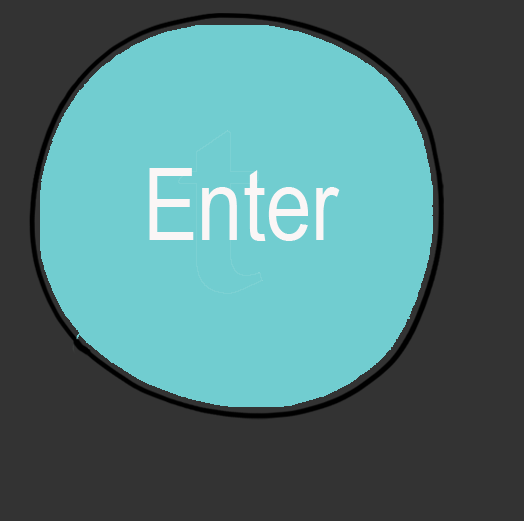
<style>
.page{position:relative;width:524px;height:521px;background:#333333}
.page>*{position:absolute;margin:0}
.t1{font:100px "ArialNarrow";color:#faf6f6}
.t2{font:100px "EccentricStd";color:#faf6f6}
</style>
<div class="page">
<p class="t1" style="left:149px;top:168px;width:191px;height:73px"><span class="t2">   </span>Enter</p>
</div>
